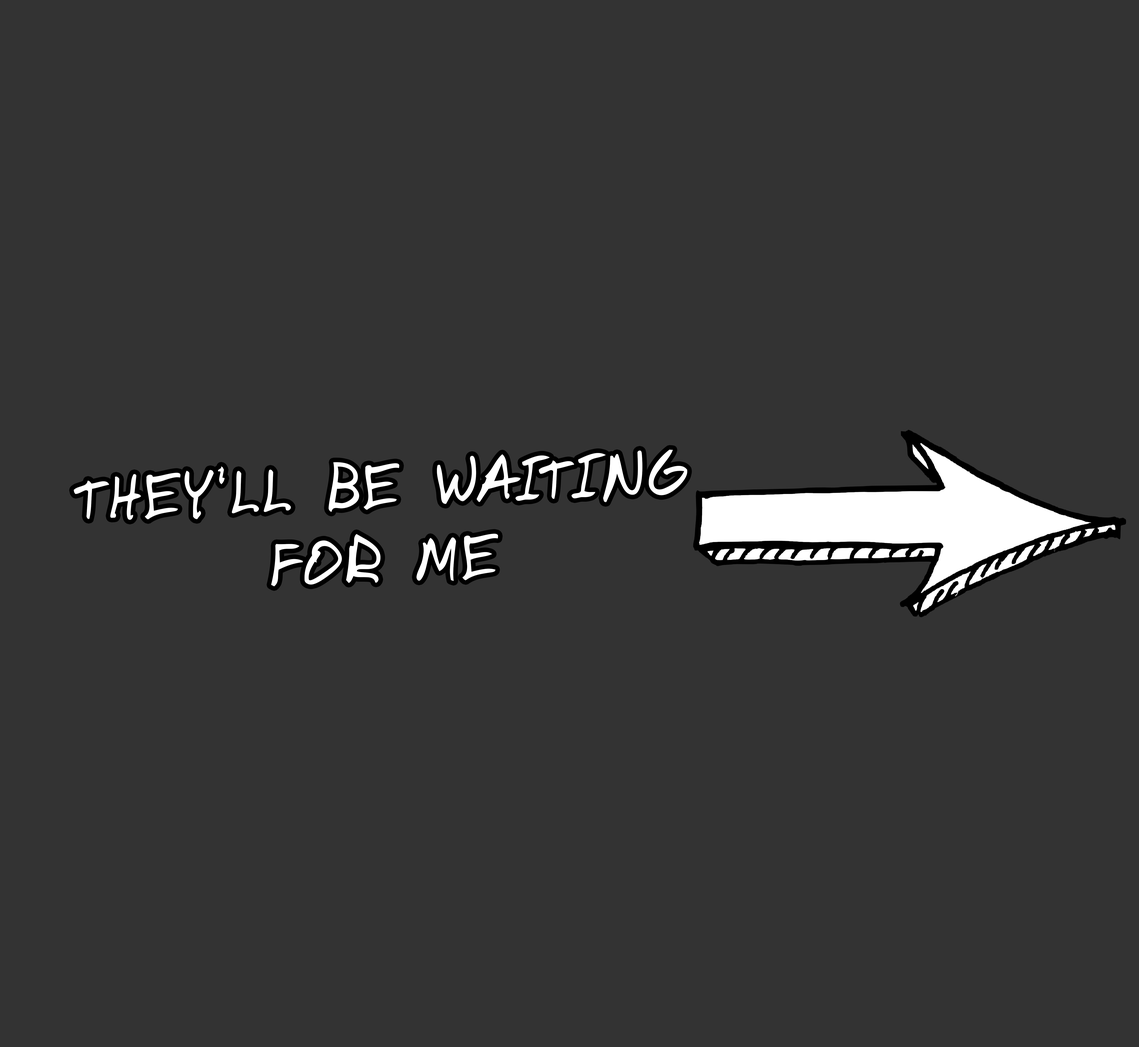
<style>
.page{position:relative;width:1139px;height:1047px;background:#333333}
.page>*{position:absolute;margin:0}
.t1{font:62.3px "DomesticManners";letter-spacing:0.04em;color:#ffffff}
</style>
<div class="page">
<p class="t1" style="left:74px;top:450px;width:613px;height:137px;text-align:center;rotate:-2deg">THEY'LL BE WAITING<br>FOR ME</p>
</div>
